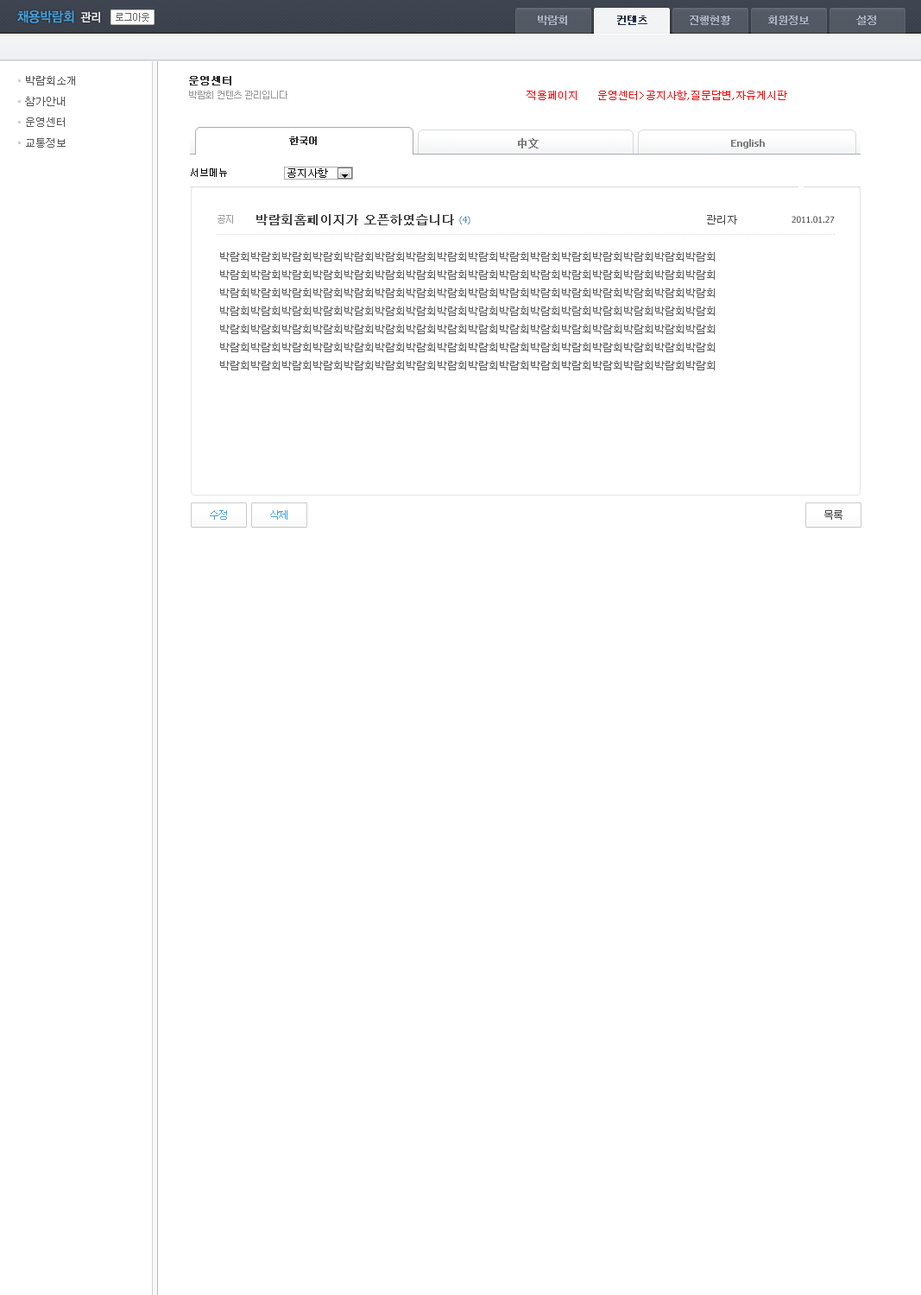
<style>
.page{position:relative;width:921px;height:1295px;background:#ffffff}
.page>*{position:absolute;margin:0}
.t1{font:13.8px "YDIYGO130-KSCpc-EUC-H";letter-spacing:-0.1em;color:#469fd9;font-weight:bold;scale:0.9 1}
.t2{font:12.1px "YDIYGO130-KSCpc-EUC-H";letter-spacing:-0.1em;color:#f0f0f0;font-weight:bold;scale:0.9 1}
.t3{font:10.4px "Dotum";letter-spacing:-0.1em;color:#aab1be;font-weight:bold}
.t4{font:10.4px "Dotum";letter-spacing:-0.1em;color:#212e40;font-weight:bold}
.t5{font:10.4px/20.7px "Dotum";color:#535353}
.t6{font:10.4px "Dotum";color:#2e2e2e;font-weight:bold}
.t7{font:9.5px "Dotum";letter-spacing:-0.1em;color:#999999}
.t8{font:10.4px "Dotum";color:#ff0000}
.t9{font:9.5px "Dotum";letter-spacing:-0.1em;color:#333333;font-weight:bold}
.t10{font:10.4px "SimSun";color:#7d7d7d;font-weight:bold}
.t11{font:9.5px "Tahoma";color:#7d7d7d;font-weight:bold}
.t12{font:12.1px "Dotum";color:#454545;font-weight:bold}
.t13{font:8.6px "Tahoma"}
.t14{font:10.4px "Dotum";color:#454545}
.t15{font:8.6px "Tahoma";color:#454545}
.t16{font:10.4px "Dotum";color:#5c5c5c}
.t17{font:10.4px "Dotum";letter-spacing:-0.1em;color:#469ed9}
.t18{font:10.4px "Dotum";letter-spacing:-0.1em;color:#454545}
</style>
<div class="page">
<p class="t1" style="left:17px;top:10px;width:57px;height:13px">채용박람회</p>
<p class="t2" style="left:80px;top:11px;width:20px;height:12px">관리</p>
<p class="t3" style="left:538px;top:16px;width:29px;height:9px">박람회</p>
<p class="t4" style="left:617px;top:16px;width:30px;height:9px">컨텐츠</p>
<p class="t3" style="left:690px;top:16px;width:41px;height:9px">진행현황</p>
<p class="t3" style="left:768px;top:16px;width:41px;height:9px">회원정보</p>
<p class="t3" style="left:856px;top:16px;width:20px;height:9px">설정</p>
<p class="t5" style="left:25px;top:76px;width:50px;height:72px">박람회소개<br>참가안내<br>운영센터<br>교통정보</p>
<p class="t6" style="left:189px;top:76px;width:42px;height:9px">운영센터</p>
<p class="t7" style="left:189px;top:91px;width:98px;height:8px">박람회 컨텐츠 관리입니다</p>
<p class="t8" style="left:527px;top:91px;width:50px;height:9px">적용페이지</p>
<p class="t8" style="left:598px;top:91px;width:189px;height:9px">운영센터&gt;공지사항,질문답변,자유게시판</p>
<p class="t9" style="left:289px;top:136px;width:28px;height:9px">한국어</p>
<p class="t10" style="left:518px;top:138px;width:21px;height:10px">中文</p>
<p class="t11" style="left:731px;top:139px;width:34px;height:9px">English</p>
<p class="t7" style="left:218px;top:215px;width:15px;height:9px">공지</p>
<p class="t12" style="left:256px;top:214px;width:198px;height:11px">박람회홈페이지가 오픈하였습니다</p>
<p class="t13" style="left:459px;top:216px;width:11px;height:8px">(4)</p>
<p class="t14" style="left:707px;top:215px;width:30px;height:9px">관리자</p>
<p class="t15" style="left:792px;top:216px;width:43px;height:7px">2011.01.27</p>
<p class="t16" style="left:220px;top:252px;width:495px;height:118px">박람회박람회박람회박람회박람회박람회박람회박람회박람회박람회박람회박람회박람회박람회박람회박람회<br>박람회박람회박람회박람회박람회박람회박람회박람회박람회박람회박람회박람회박람회박람회박람회박람회<br>박람회박람회박람회박람회박람회박람회박람회박람회박람회박람회박람회박람회박람회박람회박람회박람회<br>박람회박람회박람회박람회박람회박람회박람회박람회박람회박람회박람회박람회박람회박람회박람회박람회<br>박람회박람회박람회박람회박람회박람회박람회박람회박람회박람회박람회박람회박람회박람회박람회박람회<br>박람회박람회박람회박람회박람회박람회박람회박람회박람회박람회박람회박람회박람회박람회박람회박람회<br>박람회박람회박람회박람회박람회박람회박람회박람회박람회박람회박람회박람회박람회박람회박람회박람회</p>
<p class="t17" style="left:210px;top:510px;width:17px;height:10px">수정</p>
<p class="t17" style="left:270px;top:510px;width:17px;height:10px">삭제</p>
<p class="t18" style="left:824px;top:510px;width:18px;height:10px">목록</p>
</div>
